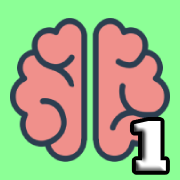
<style>
.page{position:relative;width:180px;height:180px;background:#8cff96}
.page>*{position:absolute;margin:0}
.t1{font:64px "AlfaSlabOne-Regular";color:#ffffff}
</style>
<div class="page">
<p class="t1" style="left:133px;top:121px;width:33px;height:50px">1</p>
</div>
